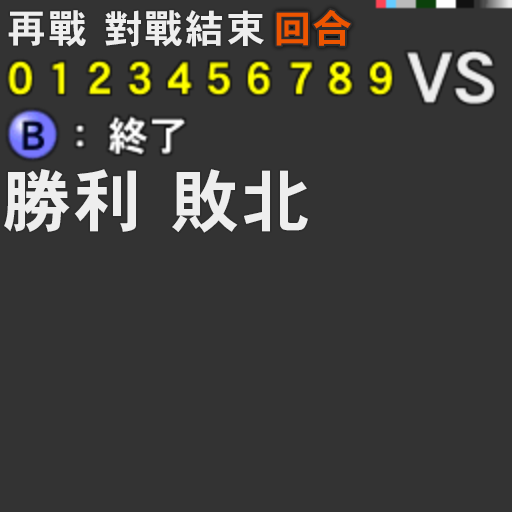
<style>
.page{position:relative;width:512px;height:512px;background:#333333}
.page>*{position:absolute;margin:0}
.t1{font:39px "HeiseiKakuGoStd-W7";letter-spacing:0.06em;color:#eeeeee}
.t2{font:39px "HeiseiKakuGoStd-W7";letter-spacing:0.06em;color:#ed5500}
.t3{font:69px "HeiseiKakuGoStd-W7";letter-spacing:0.06em;color:#eeeeee}
</style>
<div class="page">
<p class="t1" style="left:8px;top:10px;width:78px;height:37px">再戰</p>
<p class="t1" style="left:105px;top:10px;width:159px;height:37px">對戰結束</p>
<p class="t2" style="left:276px;top:9px;width:75px;height:37px">回合</p>
<p class="t3" style="left:4px;top:169px;width:132px;height:63px">勝利</p>
<p class="t3" style="left:172px;top:169px;width:136px;height:64px">敗北</p>
</div>
